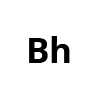
<style>
.page{position:relative;width:100px;height:100px;background:#ffffff}
.page>*{position:absolute;margin:0}
.t1{font:35px "OpenSans-Bold";color:#000000}
</style>
<div class="page">
<p class="t1" style="left:29px;top:36px;width:41px;height:27px">Bh</p>
</div>
